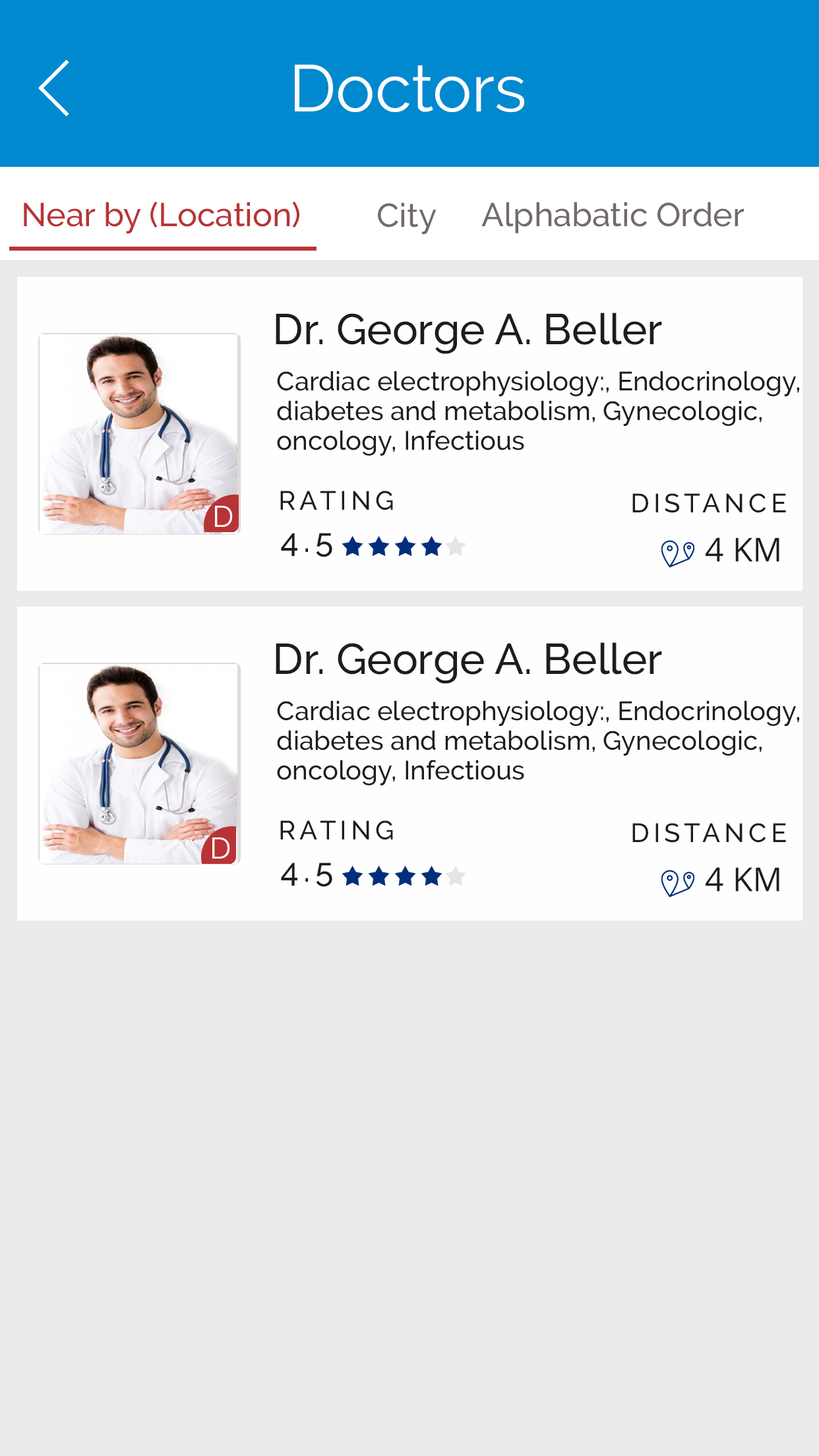
<style>
.page{position:relative;width:819px;height:1456px;background:#ebebeb}
.page>*{position:absolute;margin:0}
.t1{font:65.9px "Raleway-Regular";color:#fdfeff}
.t2{font:33px "Raleway-Medium";color:#b83336}
.t3{font:33px "Raleway-Medium";color:#726a6b}
.t4{font:42.9px "Raleway-Medium";color:#1d1d1d}
.t5{font:26.4px/29.7px "Raleway-Medium";color:#1d1d1d}
.t6{font:26.4px "Raleway-Medium";letter-spacing:0.15em;color:#1d1d1d}
.t7{font:29.7px "Raleway-Regular";color:#fefbfb}
.t8{font:33px "Raleway-Medium";letter-spacing:0.15em;color:#1d1d1d}
.t9{font:33px "OpenSans";color:#1d1d1d;text-transform:uppercase}
</style>
<div class="page">
<p class="t1" style="left:295px;top:65px;width:229px;height:47px">Doctors</p>
<p class="t2" style="left:24px;top:201px;width:275px;height:33px">Near by (Location)</p>
<p class="t3" style="left:378px;top:202px;width:59px;height:33px">City</p>
<p class="t3" style="left:481px;top:202px;width:263px;height:31px">Alphabatic Order</p>
<p class="t4" style="left:276px;top:313px;width:386px;height:41px">Dr. George A. Beller</p>
<p class="t5" style="left:277px;top:371px;width:522px;height:85px">Cardiac electrophysiology:, Endocrinology,<br>diabetes and metabolism, Gynecologic, <br>oncology, Infectious</p>
<p class="t6" style="left:280px;top:491px;width:113px;height:19px">RATING</p>
<p class="t6" style="left:632px;top:493px;width:154px;height:20px">DISTANCE</p>
<p class="t7" style="left:215px;top:506px;width:18px;height:21px">D</p>
<p class="t8" style="left:281px;top:533px;width:51px;height:24px">4.5</p>
<p class="t9" style="left:706px;top:537px;width:73px;height:25px">4 km</p>
<p class="t4" style="left:276px;top:642px;width:386px;height:42px">Dr. George A. Beller</p>
<p class="t5" style="left:277px;top:700px;width:522px;height:85px">Cardiac electrophysiology:, Endocrinology,<br>diabetes and metabolism, Gynecologic, <br>oncology, Infectious</p>
<p class="t6" style="left:280px;top:820px;width:113px;height:20px">RATING</p>
<p class="t6" style="left:632px;top:823px;width:154px;height:20px">DISTANCE</p>
<p class="t7" style="left:212px;top:837px;width:18px;height:22px">D</p>
<p class="t8" style="left:281px;top:863px;width:51px;height:24px">4.5</p>
<p class="t9" style="left:706px;top:867px;width:73px;height:25px">4 km</p>
</div>
